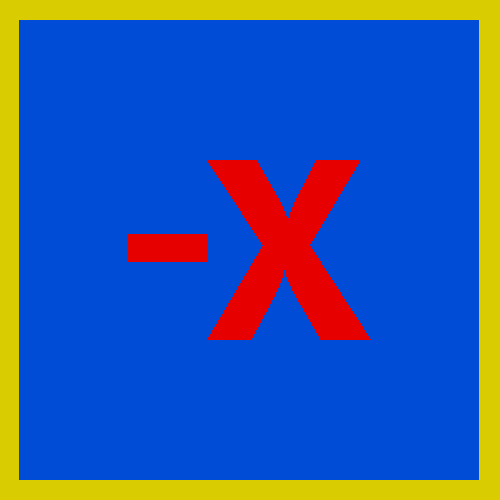
<style>
.page{position:relative;width:500px;height:500px;background:#004cd6}
.page>*{position:absolute;margin:0}
.t1{font:353px "Futura-CondensedMedium";color:#e60000;scale:1.25 1}
</style>
<div class="page">
<p class="t1" style="left:128px;top:160px;width:243px;height:180px">-x</p>
</div>
